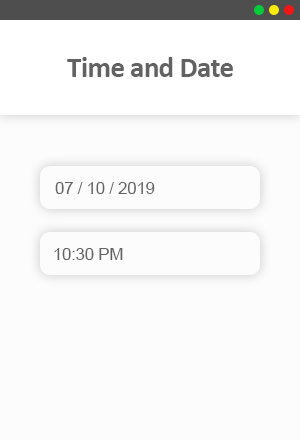
<style>
.page{position:relative;width:300px;height:440px;background:#fcfcfc}
.page>*{position:absolute;margin:0}
.t1{font:29.2px "Calibri-Bold";letter-spacing:-0.025em;color:#626262}
.t2{font:17.3px "ArialMT";letter-spacing:-0.025em;color:#626262}
</style>
<div class="page">
<p class="t1" style="left:67px;top:57px;width:166px;height:20px">Time and Date</p>
<p class="t2" style="left:55px;top:182px;width:100px;height:12px">07 / 10 / 2019</p>
<p class="t2" style="left:54px;top:248px;width:69px;height:12px">10:30 PM</p>
</div>
